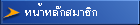
<style>
.page{position:relative;width:140px;height:25px}
.page>*{position:absolute;margin:0}
.t1{font:15.3px "EucrosiaDSE";color:#ffffff;scale:1.12 1}
</style>
<div class="page">
<p class="t1" style="left:25px;top:3px;width:72px;height:13px">Ë¹éÒËÅÑ¡ÊÁÒªÔ¡</p>
</div>
